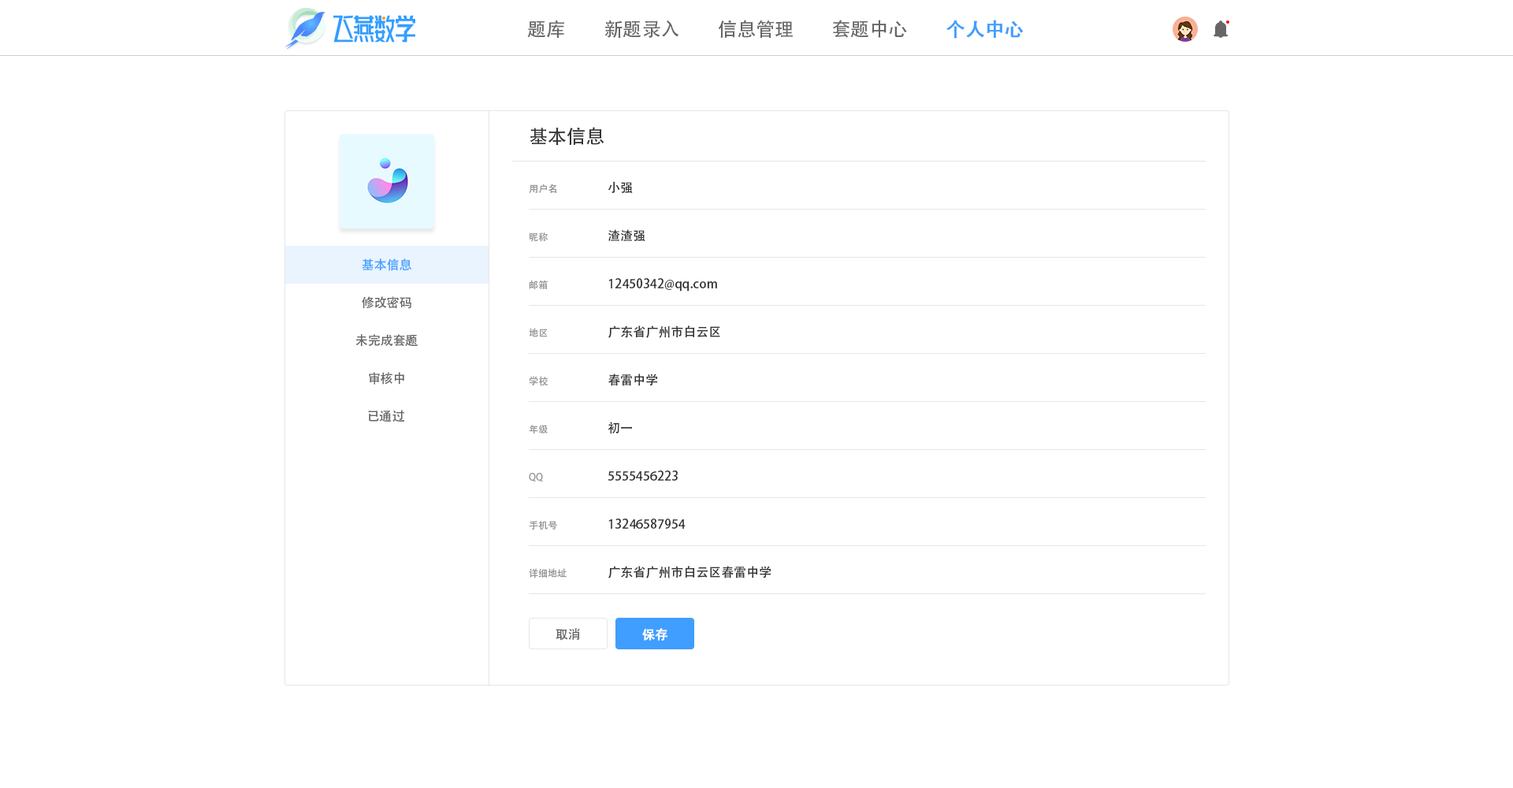
<style>
.page{position:relative;width:1513px;height:788px;background:#ffffff}
.page>*{position:absolute;margin:0}
.t1{font:18.9px "AdobeHeitiStd-Regular";color:#666666}
.t2{font:18.9px "AdobeHeitiStd-Regular";color:#409eff;font-weight:bold}
.t3{font:18.9px "AdobeHeitiStd-Regular";color:#333333}
.t4{font:9.5px "AdobeHeitiStd-Regular";color:#999999}
.t5{font:12.6px "AdobeHeitiStd-Regular";color:#333333}
.t6{font:12.6px "AdobeHeitiStd-Regular";color:#409eff}
.t7{font:12.6px "AdobeHeitiStd-Regular";color:#666666}
.t8{font:12.6px "AdobeHeitiStd-Regular";color:#fefefe;font-weight:bold}
</style>
<div class="page">
<p class="t1" style="left:527px;top:20px;width:37px;height:18px">题库</p>
<p class="t1" style="left:604px;top:20px;width:75px;height:18px">新题录入</p>
<p class="t1" style="left:718px;top:20px;width:75px;height:19px">信息管理</p>
<p class="t1" style="left:833px;top:20px;width:74px;height:18px">套题中心</p>
<p class="t2" style="left:946px;top:20px;width:78px;height:19px">个人中心</p>
<p class="t3" style="left:530px;top:127px;width:74px;height:18px">基本信息</p>
<p class="t4" style="left:529px;top:184px;width:28px;height:9px">用户名</p>
<p class="t5" style="left:608px;top:181px;width:25px;height:13px">小强</p>
<p class="t4" style="left:530px;top:232px;width:18px;height:10px">昵称</p>
<p class="t5" style="left:608px;top:229px;width:37px;height:13px">渣渣强</p>
<p class="t6" style="left:362px;top:258px;width:50px;height:13px">基本信息</p>
<p class="t4" style="left:529px;top:280px;width:19px;height:10px">邮箱</p>
<p class="t5" style="left:608px;top:278px;width:109px;height:14px">12450342@qq.com</p>
<p class="t7" style="left:362px;top:296px;width:49px;height:13px">修改密码</p>
<p class="t4" style="left:529px;top:328px;width:19px;height:9px">地区</p>
<p class="t5" style="left:608px;top:325px;width:112px;height:13px">广东省广州市白云区</p>
<p class="t7" style="left:355px;top:334px;width:63px;height:13px">未完成套题</p>
<p class="t7" style="left:369px;top:372px;width:35px;height:13px">审核中</p>
<p class="t4" style="left:529px;top:376px;width:19px;height:10px">学校</p>
<p class="t5" style="left:608px;top:374px;width:50px;height:12px">春雷中学</p>
<p class="t7" style="left:368px;top:410px;width:37px;height:12px">已通过</p>
<p class="t4" style="left:529px;top:425px;width:19px;height:9px">年级</p>
<p class="t5" style="left:608px;top:422px;width:24px;height:12px">初一</p>
<p class="t4" style="left:529px;top:473px;width:14px;height:9px">QQ</p>
<p class="t5" style="left:608px;top:470px;width:70px;height:11px">5555456223</p>
<p class="t4" style="left:529px;top:521px;width:28px;height:9px">手机号</p>
<p class="t5" style="left:608px;top:519px;width:78px;height:10px">13246587954</p>
<p class="t4" style="left:529px;top:568px;width:38px;height:10px">详细地址</p>
<p class="t5" style="left:608px;top:566px;width:164px;height:12px">广东省广州市白云区春雷中学</p>
<p class="t7" style="left:556px;top:628px;width:24px;height:13px">取消</p>
<p class="t8" style="left:642px;top:628px;width:25px;height:13px">保存</p>
</div>
